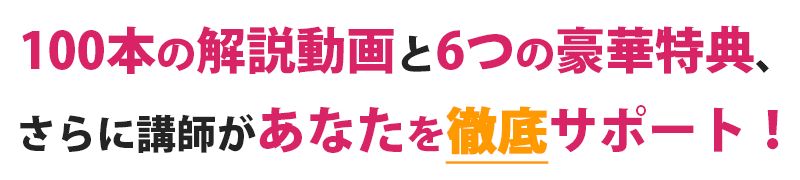
<style>
.page{position:relative;width:800px;height:180px;background:#ffffff}
.page>*{position:absolute;margin:0}
.t1{font:40px/80px "KozGoPr6N-Heavy";color:#242424}
.t2{font:50px/80px "KozGoPr6N-Heavy";color:#d92367}
.t3{font:40px/80px "KozGoPr6N-Heavy";color:#d92367}
.t4{font:50px/80px "KozGoPr6N-Heavy";color:#ff9900;font-weight:bold;text-decoration:underline}
</style>
<div class="page">
<p class="t1" style="left:20px;top:25px;width:759px;height:139px;text-align:center"><span class="t2">100本</span><span class="t3">の</span><span class="t2">解説動画</span>と<span class="t2">6つ</span><span class="t3">の</span><span class="t2">豪華特典</span>、<br>さらに講師が<span class="t2">あなた</span><span class="t3">を</span><span class="t4">徹底</span><span class="t2">サポート！</span></p>
</div>
